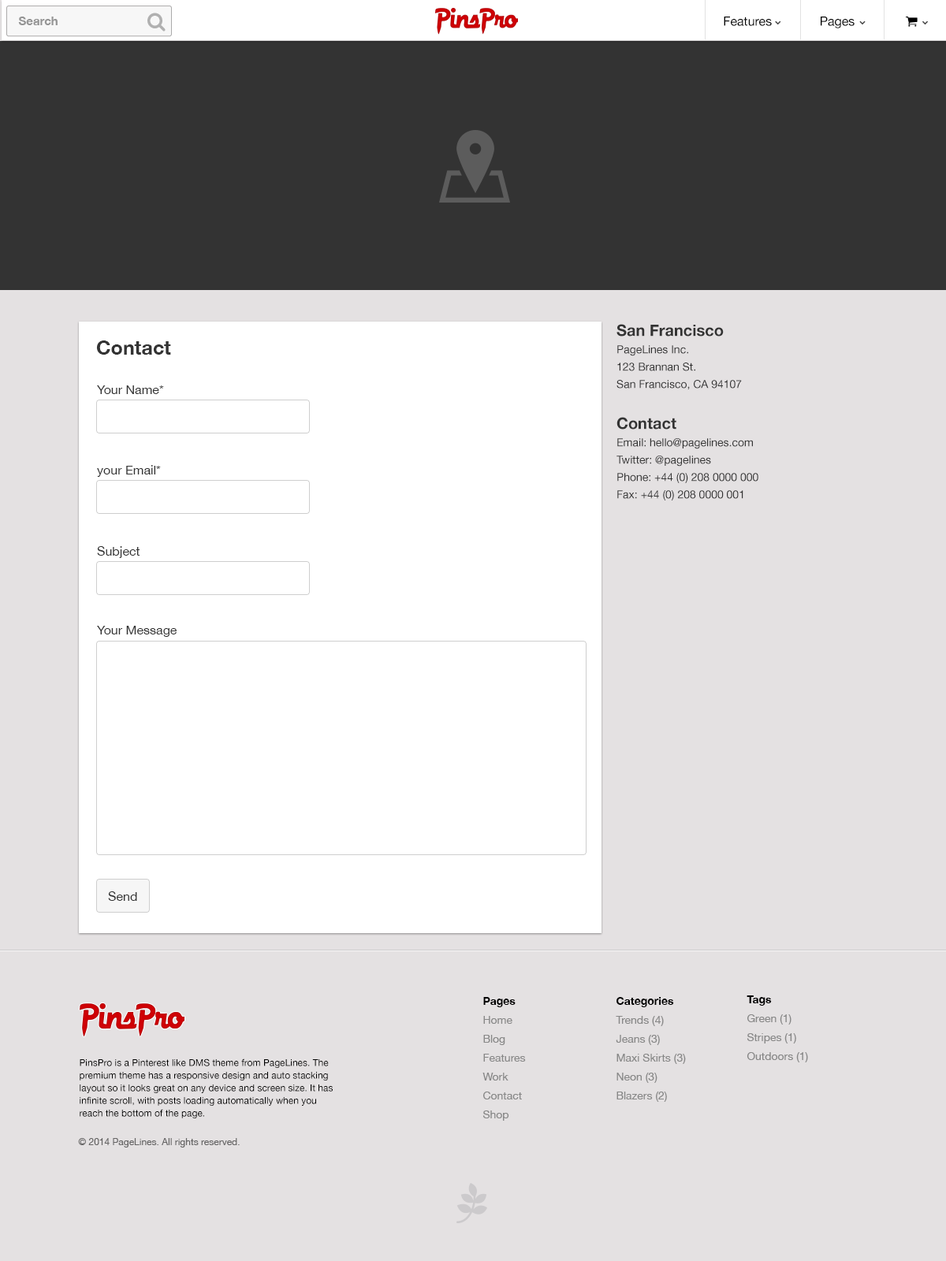
<style>
.page{position:relative;width:946px;height:1261px;background:#e4e1e2}
.page>*{position:absolute;margin:0}
.t1{font:11.9px "HelveticaNeue-Bold";color:#959595}
.t2{font:11px/17.3px "HelveticaNeue";color:#333333}
.t3{font:15.8px/23.6px "HelveticaNeue-Bold";color:#333333}
.t4{font:19.7px "HelveticaNeue-Bold";color:#333333}
.t5{font:12.6px "HelveticaNeue";color:#333333}
.t6{font:11px/18.9px "MyriadPro-Regular";color:#888888}
.t7{font:11px/18.9px "MyriadPro-Regular";color:#000000}
.t8{font:9.5px "HelveticaNeue";color:#000000}
.t9{font:9.5px "MyriadPro-Regular";color:#666565}
</style>
<div class="page">
<p class="t1" style="left:18px;top:17px;width:40px;height:8px">Search</p>
<p class="t2" style="left:616px;top:324px;width:142px;height:176px"><span class="t3">San Francisco<br></span>PageLines Inc.<br>123 Brannan St.<br>San Francisco, CA 94107<br><br><span class="t3">Contact<br></span>Email: hello@pagelines.com<br>Twitter: @pagelines<br>Phone: +44 (0) 208 0000 000<br>Fax: +44 (0) 208 0000 001</p>
<p class="t4" style="left:96px;top:340px;width:75px;height:15px">Contact</p>
<p class="t5" style="left:97px;top:385px;width:67px;height:9px">Your Name*</p>
<p class="t5" style="left:97px;top:465px;width:64px;height:12px">your Email*</p>
<p class="t5" style="left:97px;top:546px;width:43px;height:12px">Subject</p>
<p class="t5" style="left:97px;top:626px;width:80px;height:11px">Your Message</p>
<p class="t5" style="left:108px;top:891px;width:29px;height:10px">Send</p>
<p class="t6" style="left:482px;top:997px;width:44px;height:124px"><span class="t7">Pages<br></span>Home<br>Blog<br>Features<br>Work<br>Contact<br>Shop</p>
<p class="t6" style="left:615px;top:997px;width:71px;height:105px"><span class="t7">Categories<br></span>Trends (4)<br>Jeans (3)<br>Maxi Skirts (3)<br>Neon (3)<br>Blazers (2)</p>
<p class="t6" style="left:746px;top:995px;width:62px;height:67px"><span class="t7">Tags<br></span>Green (1)<br>Stripes (1)<br>Outdoors (1)</p>
<p class="t8" style="left:80px;top:1058px;width:253px;height:60px">PinsPro is a Pinterest like DMS theme from PageLines. The premium theme has a responsive design and auto stacking layout so it looks great on any device and screen size. It has infinite scroll, with posts loading automatically when you reach the bottom of the page.</p>
<p class="t9" style="left:78px;top:1138px;width:162px;height:9px">© 2014 PageLines. All rights reserved.</p>
</div>
